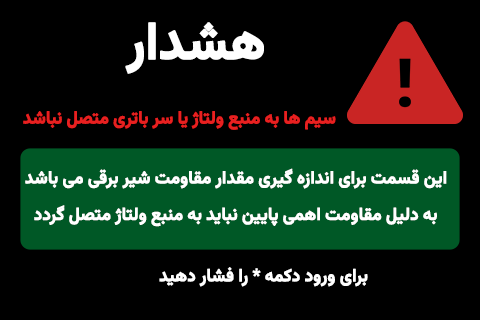
<style>
.page{position:relative;width:480px;height:320px;background:#000000}
.page>*{position:absolute;margin:0}
.t1{font:52.6px "Vazirmatn-Bold";letter-spacing:-0.01em;color:#ffffff;font-weight:bold;scale:0.94 1}
.t2{font:17.7px "Vazirmatn-Bold";letter-spacing:-0.01em;color:#e82020;font-weight:bold;scale:0.94 1}
.t3{font:17.7px "Vazirmatn-Bold";letter-spacing:-0.01em;color:#ffffff;font-weight:bold;scale:0.94 1}
</style>
<div class="page">
<p class="t1" style="left:125px;top:22px;width:139px;height:52px">هشدار</p>
<p class="t2" style="left:23px;top:111px;width:313px;height:19px">سیم ها به منبع ولتاژ یا سر باتری متصل نباشد</p>
<p class="t3" style="left:25px;top:168px;width:422px;height:21px">این قسمت برای اندازه گیری مقدار مقاومت شیر برقی می باشد</p>
<p class="t3" style="left:34px;top:205px;width:403px;height:22px">به دلیل مقاومت اهمی پایین نباید به منبع ولتاژ متصل گردد</p>
<p class="t3" style="left:159px;top:267px;width:209px;height:20px">برای ورود دکمه * را فشار دهید</p>
</div>
